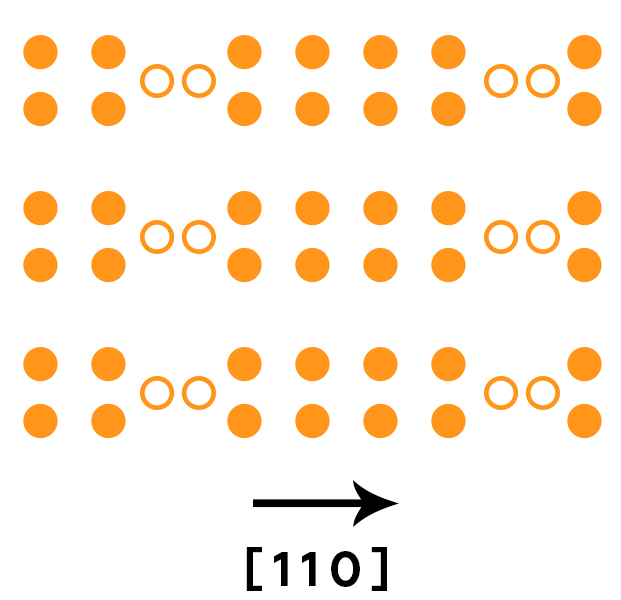
<style>
.page{position:relative;width:621px;height:600px;background:#ffffff}
.page>*{position:absolute;margin:0}
.t1{font:48px "Geometria-Bold";letter-spacing:0.19em;color:#000000;text-transform:uppercase}
</style>
<div class="page">
<p class="t1" style="left:246px;top:547px;width:141px;height:44px">[110]</p>
</div>
